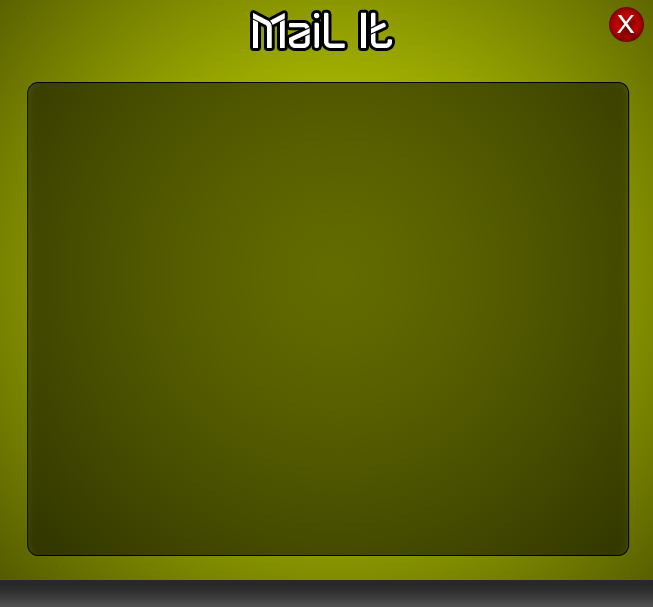
<style>
.page{position:relative;width:653px;height:607px}
.page>*{position:absolute;margin:0}
.t1{font:50.2px "DYLOVASTUFF";color:#ffffff}
.t2{font:25.1px "LucidaSans-Typewriter";color:#ffffff;scale:1.16 1}
</style>
<div class="page">
<p class="t1" style="left:253px;top:12px;width:139px;height:36px">Mail It</p>
<p class="t2" style="left:617px;top:15px;width:18px;height:18px">X</p>
</div>
